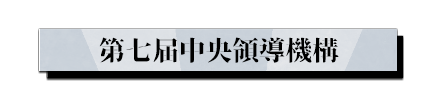
<style>
.page{position:relative;width:444px;height:98px;background:#ffffff}
.page>*{position:absolute;margin:0}
.t1{font:26.7px "SoukouMincho";color:#000000}
</style>
<div class="page">
<p class="t1" style="left:99px;top:37px;width:240px;height:26px">第七届中央領導機構</p>
</div>
